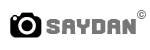
<style>
.page{position:relative;width:150px;height:50px;background:#ffffff}
.page>*{position:absolute;margin:0}
.t1{font:12px "Arial-Black";letter-spacing:0.025em;color:#777777}
.t2{font:22px "Goma-Octagon";letter-spacing:0.025em;color:#777777}
</style>
<div class="page">
<p class="t1" style="left:137px;top:10px;width:9px;height:9px">©</p>
<p class="t2" style="left:46px;top:19px;width:90px;height:15px">Saydan</p>
</div>
